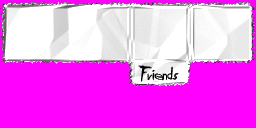
<style>
.page{position:relative;width:256px;height:128px;background:#ff00ff}
.page>*{position:absolute;margin:0}
.t1{font:18px "Daubed";color:#000000}
</style>
<div class="page">
<p class="t1" style="left:138px;top:64px;width:41px;height:18px">Friends</p>
</div>
